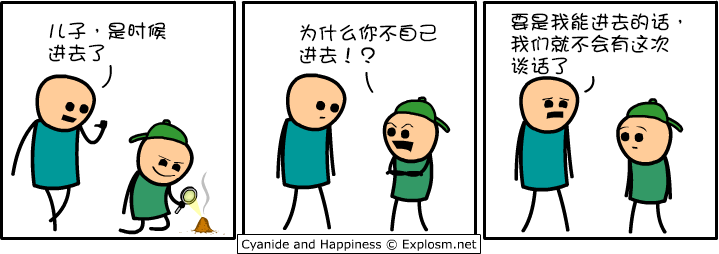
<style>
.page{position:relative;width:719px;height:254px;background:#ffffff}
.page>*{position:absolute;margin:0}
.t1{font:20px/22px "DFGirl";color:#000000}
</style>
<div class="page">
<p class="t1" style="left:510px;top:12px;width:172px;height:63px">要是我能进去的话，<br>我们就不会有这次<br>谈话了</p>
<p class="t1" style="left:48px;top:22px;width:118px;height:40px">儿子，是时候<br>进去了</p>
<p class="t1" style="left:299px;top:24px;width:138px;height:40px">为什么你不自己<br>进去！？</p>
</div>
